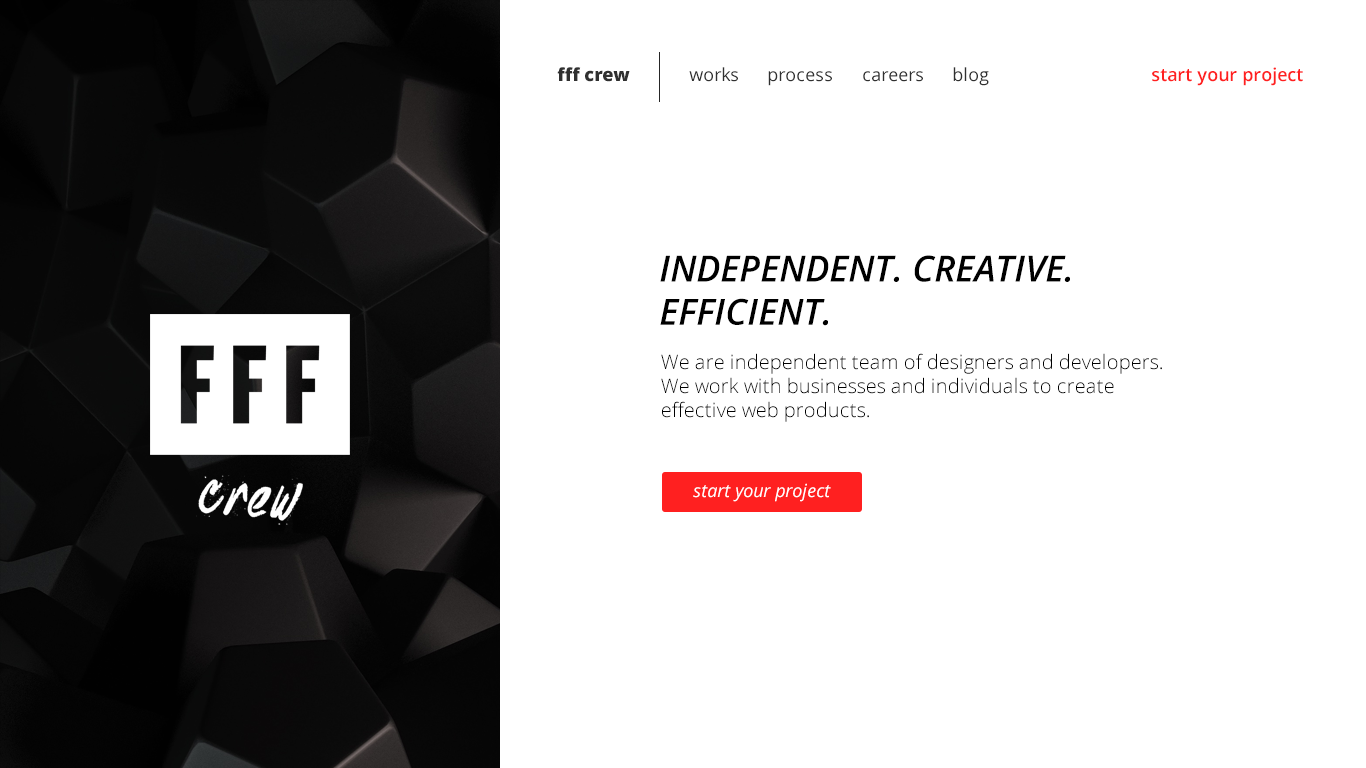
<style>
.page{position:relative;width:1366px;height:768px;background:#ffffff}
.page>*{position:absolute;margin:0}
.t1{font:18px "OpenSans-Extrabold";color:#303030}
.t2{font:18px "OpenSans";color:#303030}
.t3{font:18px "OpenSans-Semibold";color:#ff2020}
.t4{font:36px "OpenSans-SemiboldItalic";color:#000000}
.t5{font:20px "OpenSans-Light";color:#000000}
.t6{font:18px "OpenSans-Italic";color:#ffffff}
</style>
<div class="page">
<p class="t1" style="left:557px;top:67px;width:73px;height:15px">fff crew</p>
<p class="t2" style="left:689px;top:67px;width:49px;height:15px">works</p>
<p class="t2" style="left:768px;top:71px;width:64px;height:15px">process</p>
<p class="t2" style="left:863px;top:71px;width:60px;height:11px">careers</p>
<p class="t2" style="left:953px;top:67px;width:36px;height:19px">blog</p>
<p class="t3" style="left:1152px;top:67px;width:151px;height:19px">start your project</p>
<p class="t4" style="left:660px;top:255px;width:410px;height:71px">INDEPENDENT. CREATIVE.<br>EFFICIENT.</p>
<p class="t5" style="left:661px;top:353px;width:501px;height:69px">We are independent team of designers and developers. <br>We work with businesses and individuals to create <br>effective web products.</p>
<p class="t6" style="left:693px;top:483px;width:138px;height:19px">start your project</p>
</div>
